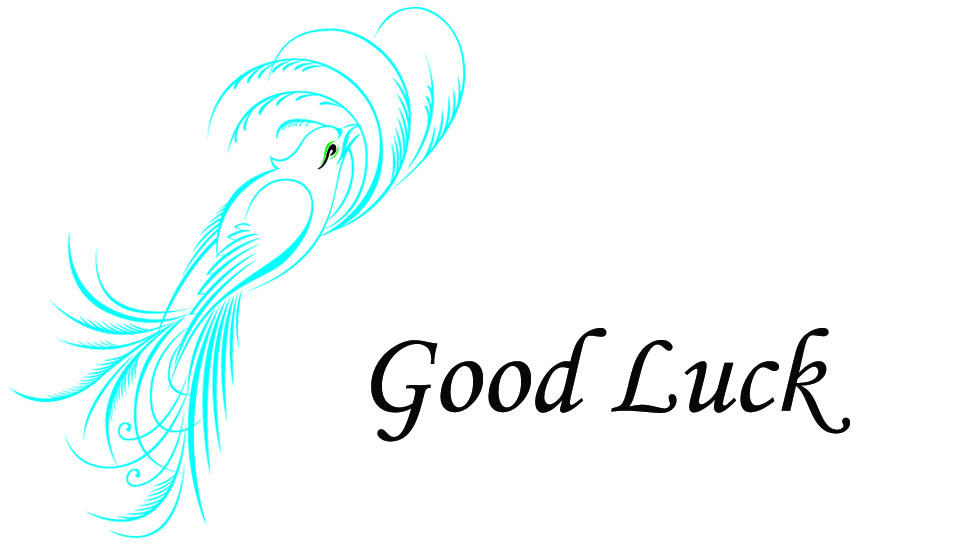
<style>
.page{position:relative;width:978px;height:545px;background:#ffffff}
.page>*{position:absolute;margin:0}
.t1{font:120px "MonotypeCorsiva";color:#060808}
</style>
<div class="page">
<p class="t1" style="left:371px;top:328px;width:479px;height:114px">Good Luck</p>
</div>
